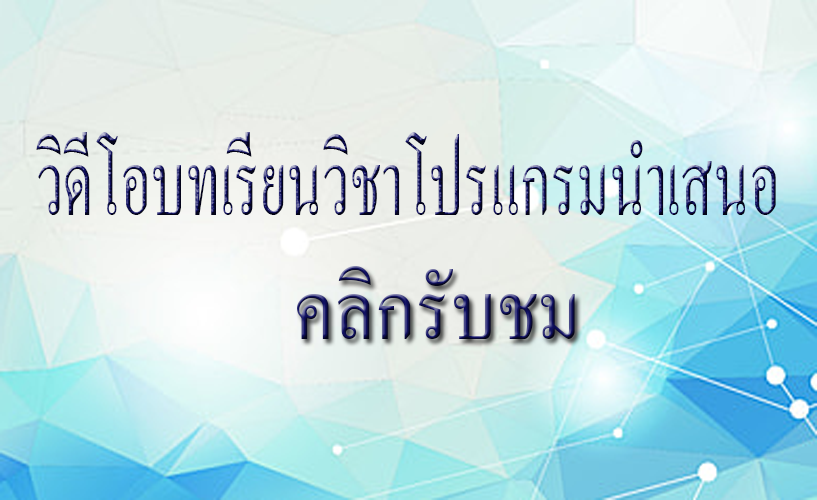
<style>
.page{position:relative;width:817px;height:500px}
.page>*{position:absolute;margin:0}
.t1{font:125.8px "AngsanaNew";scale:0.61 1}
.t2{font:112.5px "AngsanaNew";scale:0.91 1}
</style>
<div class="page">
<p class="t1" style="left:36px;top:132px;width:740px;height:83px">วิดีโอบทเรียนวิชาโปรแกรมนำเสนอ</p>
<p class="t2" style="left:297px;top:266px;width:278px;height:73px">คลิกรับชม</p>
</div>
